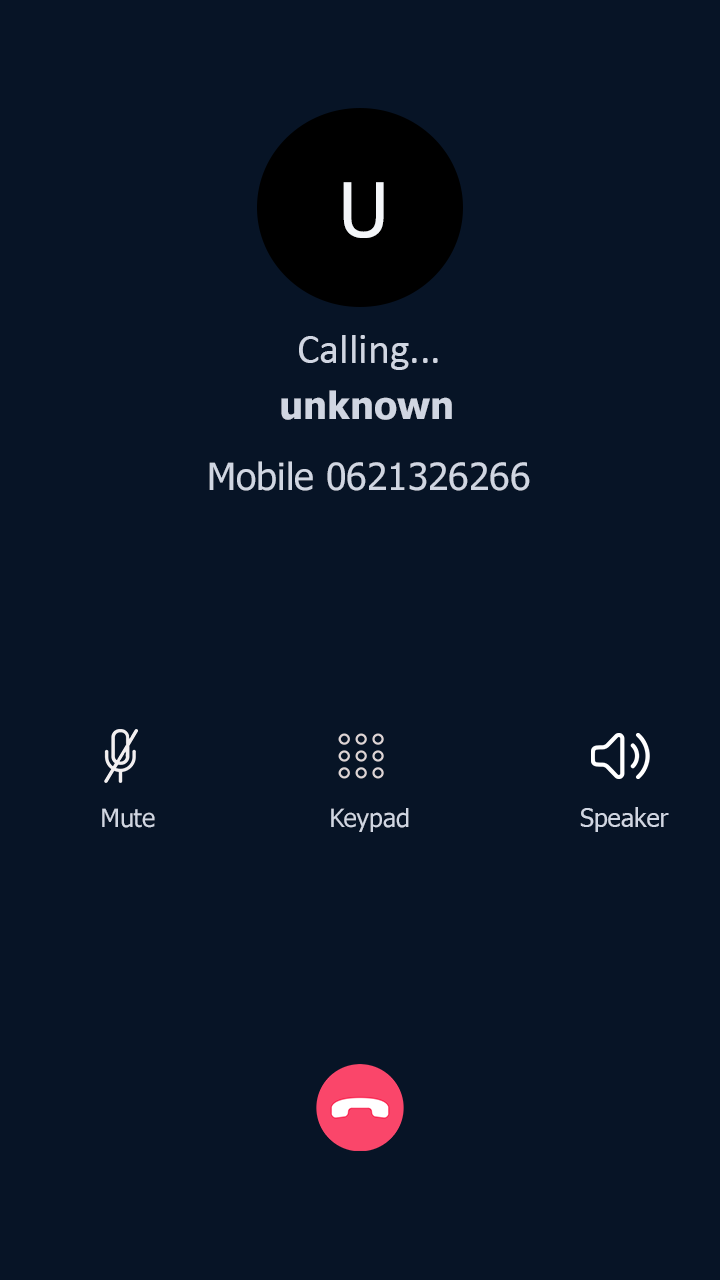
<style>
.page{position:relative;width:720px;height:1280px;background:#071426}
.page>*{position:absolute;margin:0}
.t1{font:75px "Tahoma";color:#f4f6f9}
.t2{font:41.7px "Calibri";color:#d0d6e2}
.t3{font:37.5px "Tahoma-Bold";color:#d0d6e2}
.t4{font:37.5px "Tahoma";color:#d0d6e2}
.t5{font:25px "Tahoma";color:#d0d6e2}
</style>
<div class="page">
<p class="t1" style="left:343px;top:182px;width:41px;height:56px">U</p>
<p class="t2" style="left:299px;top:335px;width:139px;height:35px">Calling...</p>
<p class="t3" style="left:281px;top:390px;width:171px;height:30px">unknown</p>
<p class="t4" style="left:209px;top:461px;width:321px;height:30px">Mobile 0621326266</p>
<p class="t5" style="left:102px;top:808px;width:53px;height:20px">Mute</p>
<p class="t5" style="left:331px;top:808px;width:78px;height:24px">Keypad</p>
<p class="t5" style="left:580px;top:807px;width:89px;height:25px">Speaker</p>
</div>
